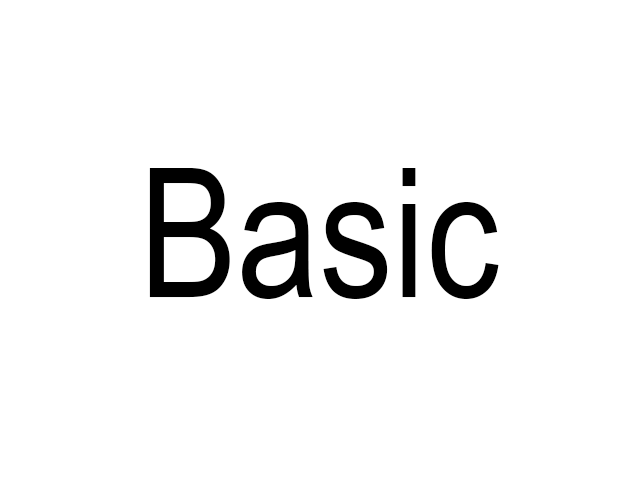
<style>
.page{position:relative;width:640px;height:480px;background:#ffffff}
.page>*{position:absolute;margin:0}
.t1{font:180px "ArialNarrow";color:#000000}
</style>
<div class="page">
<p class="t1" style="left:149px;top:168px;width:350px;height:131px">Basic</p>
</div>
